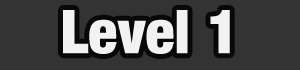
<style>
.page{position:relative;width:300px;height:70px;background:#333333}
.page>*{position:absolute;margin:0}
.t1{font:60px "Harvest";color:#f2f2f2}
</style>
<div class="page">
<p class="t1" style="left:63px;top:10px;width:167px;height:44px">Level 1</p>
</div>
